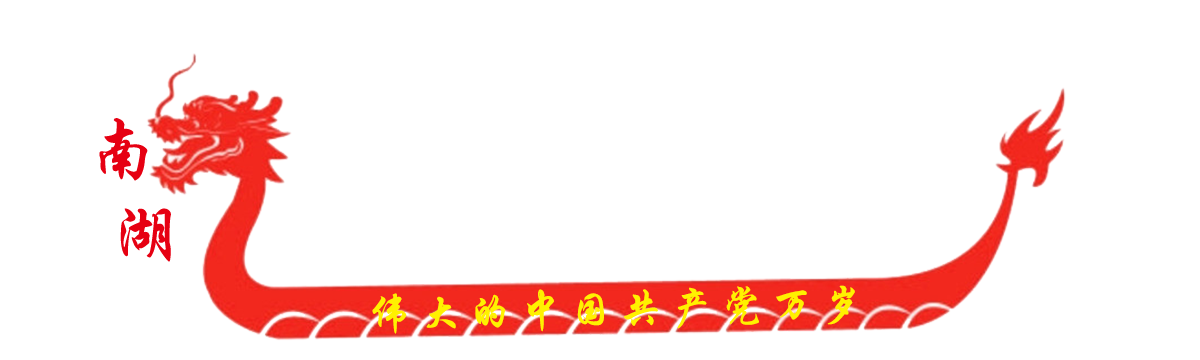
<style>
.page{position:relative;width:1200px;height:360px;background:#ffffff}
.page>*{position:absolute;margin:0}
.t1{font:72px "STXingkai-SC-Bold";letter-spacing:-0.025em;color:#e60012}
.t2{font:42px "STXingkai-SC-Bold";letter-spacing:0.199em;color:#fff100}
</style>
<div class="page">
<p class="t1" style="left:99px;top:118px;width:49px;height:63px">南</p>
<p class="t1" style="left:120px;top:208px;width:51px;height:54px">湖</p>
<p class="t2" style="left:372px;top:285px;width:483px;height:49px;rotate:-1deg">伟大的中国共产党万岁</p>
</div>
